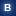
<style>
.page{position:relative;width:16px;height:16px}
.page>*{position:absolute;margin:0}
.t1{font:10px "Arial-BoldMT";letter-spacing:-0.015em;color:#ffffff}
</style>
<div class="page">
<p class="t1" style="left:4px;top:4px;width:7px;height:7px">B</p>
</div>
